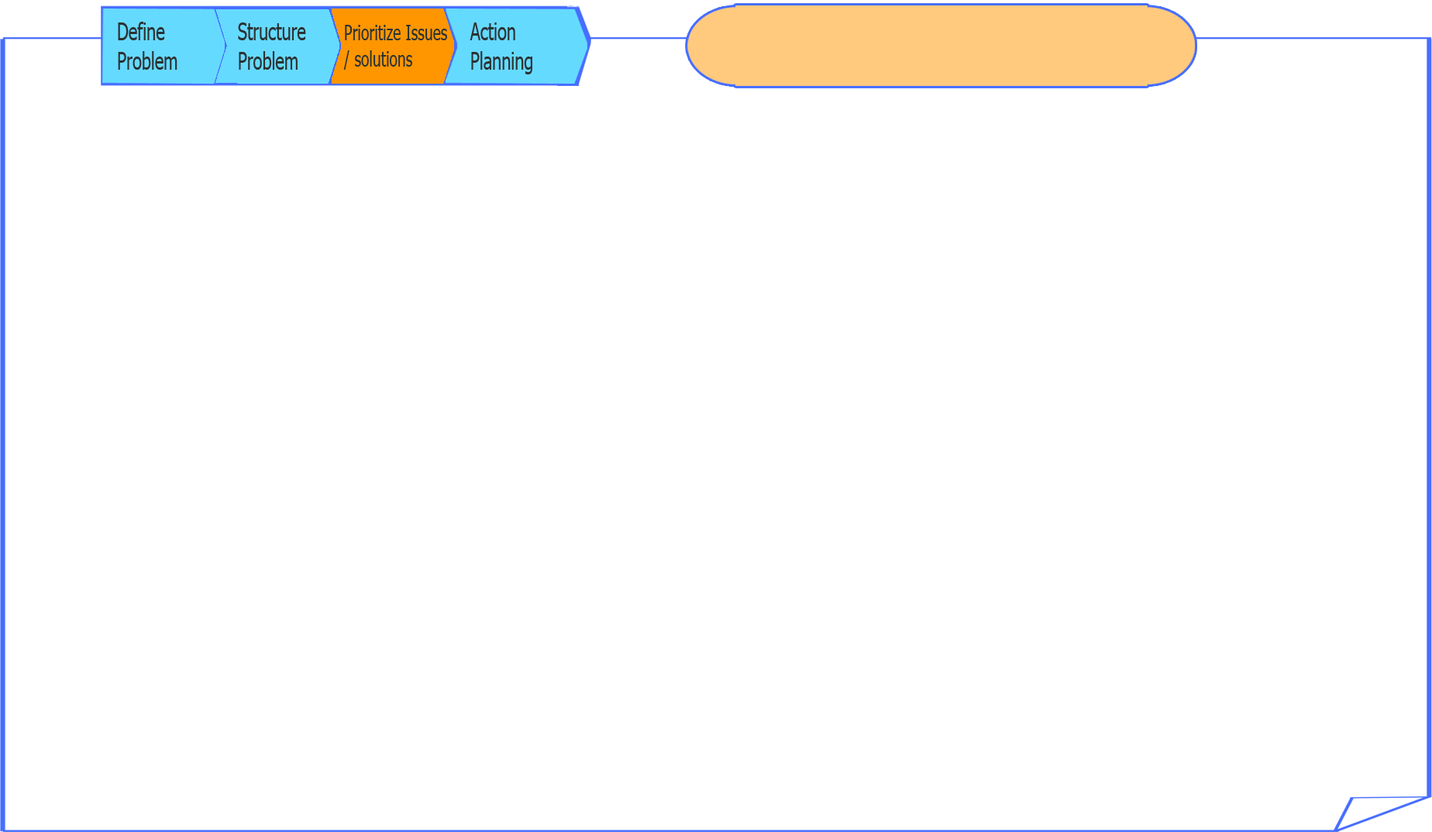
<style>
.page{position:relative;width:1432px;height:832px;background:#ffffff}
.page>*{position:absolute;margin:0}
.t1{font:24.8px "Tahoma";color:#2b3234;scale:0.68 1}
.t2{font:22px "Tahoma";color:#2b3234;scale:0.68 1}
</style>
<div class="page">
<p class="t1" style="left:118px;top:22px;width:60px;height:48px">Define<br>Problem</p>
<p class="t1" style="left:238px;top:22px;width:68px;height:48px">Structure<br>Problem</p>
<p class="t2" style="left:343px;top:25px;width:104px;height:45px">Prioritize Issues<br>/ solutions</p>
<p class="t1" style="left:470px;top:22px;width:63px;height:52px">Action<br>Planning</p>
</div>
